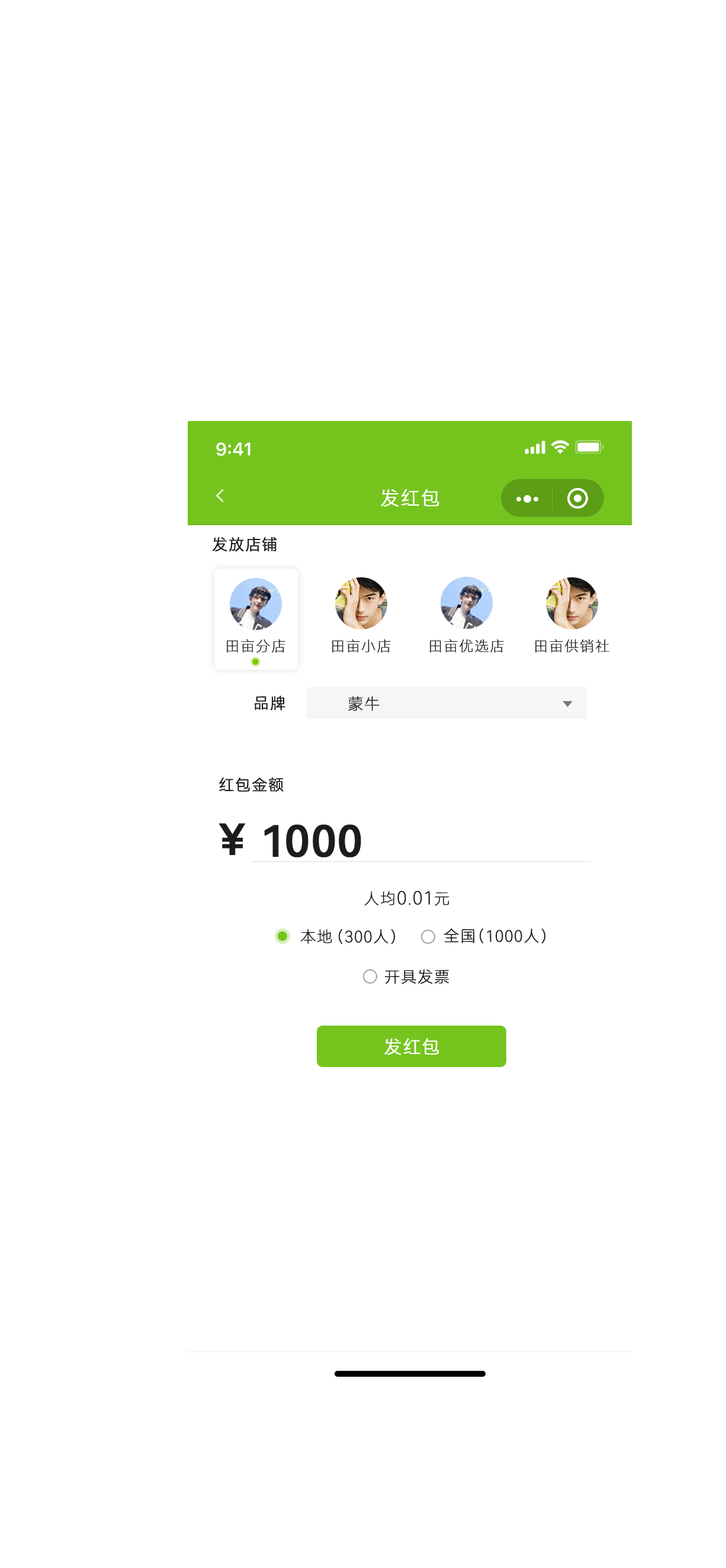
<style>
.page{position:relative;width:726px;height:1568px;background:#ffffff}
.page>*{position:absolute;margin:0}
.t1{font:18.9px "HarmonyOS_Sans_SC_Light";letter-spacing:0.04em;color:#ffffff;text-transform:uppercase;font-weight:bold}
.t2{font:15.4px "HarmonyOS_Sans_SC_Light";letter-spacing:0.04em;color:#1c1c1c;text-transform:uppercase;font-weight:bold}
.t3{font:14.2px "HarmonyOS_Sans_SC_Thin";letter-spacing:0.04em;color:#1c1c1c;text-transform:uppercase;font-weight:bold}
.t4{font:15.4px "HarmonyOS_Sans_SC_Thin";letter-spacing:0.04em;color:#111111;text-transform:uppercase;font-weight:bold}
.t5{font:42.5px "HarmonyOS_Sans_SC_Medium";letter-spacing:0.04em;color:#1c1c1c;text-transform:uppercase;font-weight:bold}
.t6{font:42.5px "HarmonyOS_Sans_SC_Medium";color:#1c1c1c;text-transform:uppercase;font-weight:bold}
.t7{font:17.8px "HarmonyOS_Sans_SC_Thin";letter-spacing:0.04em;color:#1c1c1c;text-transform:uppercase;font-weight:bold}
.t8{font:15.4px "HarmonyOS_Sans_SC_Thin";letter-spacing:0.04em;color:#1c1c1c;text-transform:uppercase;font-weight:bold}
.t9{font:15.4px "HarmonyOS_Sans_SC_Thin";letter-spacing:0.04em;color:#000000;text-transform:uppercase;font-weight:bold}
.t10{font:17.8px "HarmonyOS_Sans_SC_Light";letter-spacing:0.04em;color:#ffffff;text-transform:uppercase;font-weight:bold}
</style>
<div class="page">
<p class="t1" style="left:381px;top:489px;width:58px;height:18px">发红包</p>
<p class="t2" style="left:213px;top:537px;width:64px;height:15px">发放店铺</p>
<p class="t3" style="left:227px;top:639px;width:58px;height:14px">田亩分店</p>
<p class="t3" style="left:332px;top:639px;width:59px;height:14px">田亩小店</p>
<p class="t3" style="left:430px;top:639px;width:74px;height:14px">田亩优选店</p>
<p class="t3" style="left:535px;top:639px;width:74px;height:14px">田亩供销社</p>
<p class="t2" style="left:255px;top:696px;width:30px;height:15px">品牌</p>
<p class="t4" style="left:348px;top:696px;width:32px;height:15px">蒙牛</p>
<p class="t2" style="left:219px;top:777px;width:65px;height:15px">红包金额</p>
<p class="t5" style="left:219px;top:823px;width:26px;height:32px">￥</p>
<p class="t6" style="left:264px;top:824px;width:97px;height:33px">1000</p>
<p class="t7" style="left:364px;top:891px;width:85px;height:15px"><span class="t8">人均</span>0.01<span class="t8">元</span></p>
<p class="t8" style="left:301px;top:929px;width:31px;height:15px">本地</p>
<p class="t8" style="left:339px;top:929px;width:56px;height:15px">（300人）</p>
<p class="t8" style="left:444px;top:928px;width:30px;height:15px">全国</p>
<p class="t8" style="left:480px;top:928px;width:65px;height:16px">（1000人）</p>
<p class="t9" style="left:384px;top:969px;width:65px;height:15px">开具发票</p>
<p class="t10" style="left:384px;top:1038px;width:55px;height:17px">发红包</p>
</div>
